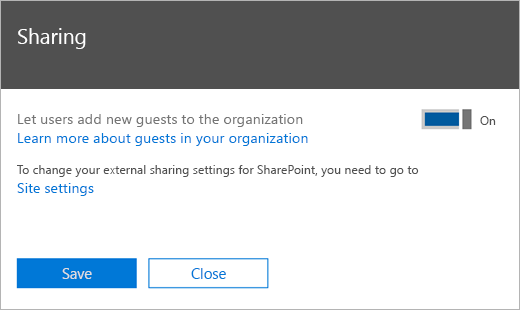
<style>
.page{position:relative;width:520px;height:310px;background:#ffffff}
.page>*{position:absolute;margin:0}
.t1{font:20.8px "SegoeUI";color:#ffffff}
.t2{font:14.5px/19.1px "SegoeUI";color:#757575}
.t3{font:14.5px/19.1px "SegoeUI";color:#0078d7}
.t4{font:12px "SegoeUI";color:#505050}
.t5{font:12.3px/18.7px "SegoeUI";color:#505050}
.t6{font:14.4px/18.7px "SegoeUI";color:#0078d7}
.t7{font:14.7px "SegoeUI";color:#dedede}
.t8{font:14.7px "SegoeUI";color:#0078d7}
</style>
<div class="page">
<p class="t1" style="left:18px;top:28px;width:68px;height:21px">Sharing</p>
<p class="t2" style="left:18px;top:114px;width:290px;height:32px">Let users add new guests to the organization<br><span class="t3">Learn more about guests in your organization</span></p>
<p class="t4" style="left:480px;top:116px;width:16px;height:9px">On</p>
<p class="t5" style="left:17px;top:165px;width:402px;height:31px">To change your external sharing settings for SharePoint, you need to go to<br><span class="t6">Site settings</span></p>
<p class="t7" style="left:62px;top:268px;width:30px;height:11px">Save</p>
<p class="t8" style="left:191px;top:268px;width:35px;height:11px">Close</p>
</div>
